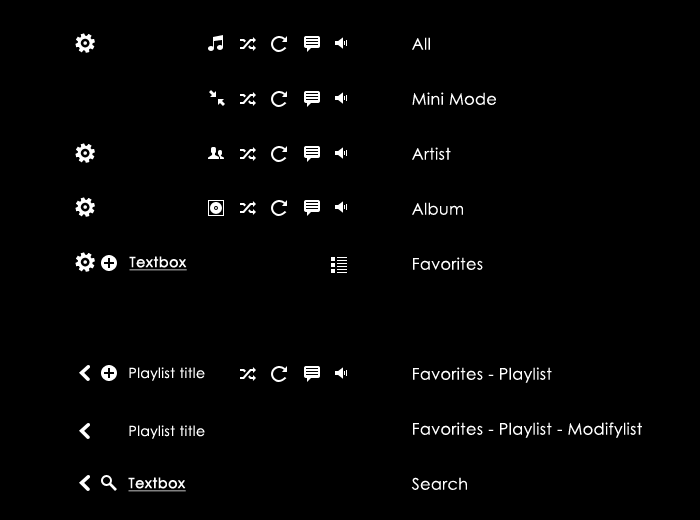
<style>
.page{position:relative;width:700px;height:520px;background:#000000}
.page>*{position:absolute;margin:0}
.t1{font:16px/55px "CenturyGothic";letter-spacing:0.025em;color:#ffffff}
.t2{font:14px "CenturyGothic";letter-spacing:0.025em;color:#ffffff;font-weight:bold;text-decoration:underline}
.t3{font:14px "CenturyGothic";letter-spacing:0.025em;color:#ffffff}
</style>
<div class="page">
<p class="t1" style="left:411px;top:37px;width:231px;height:453px">All<br>Mini Mode<br>Artist<br>Album<br>Favorites<br><br>Favorites - Playlist<br>Favorites - Playlist - Modifylist<br>Search</p>
<p class="t2" style="left:129px;top:256px;width:58px;height:15px">Textbox</p>
<p class="t3" style="left:129px;top:367px;width:76px;height:14px">Playlist title</p>
<p class="t3" style="left:129px;top:425px;width:76px;height:14px">Playlist title</p>
<p class="t2" style="left:128px;top:477px;width:58px;height:15px">Textbox</p>
</div>
